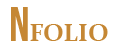
<style>
.page{position:relative;width:120px;height:50px;background:#ffffff}
.page>*{position:absolute;margin:0}
.t1{font:25px "Constantia-Bold";color:#c58734}
.t2{font:48px "BebasNeue";color:#c58734}
</style>
<div class="page">
<p class="t1" style="left:11px;top:7px;width:97px;height:34px"><span class="t2">N</span>FOLIO</p>
</div>
